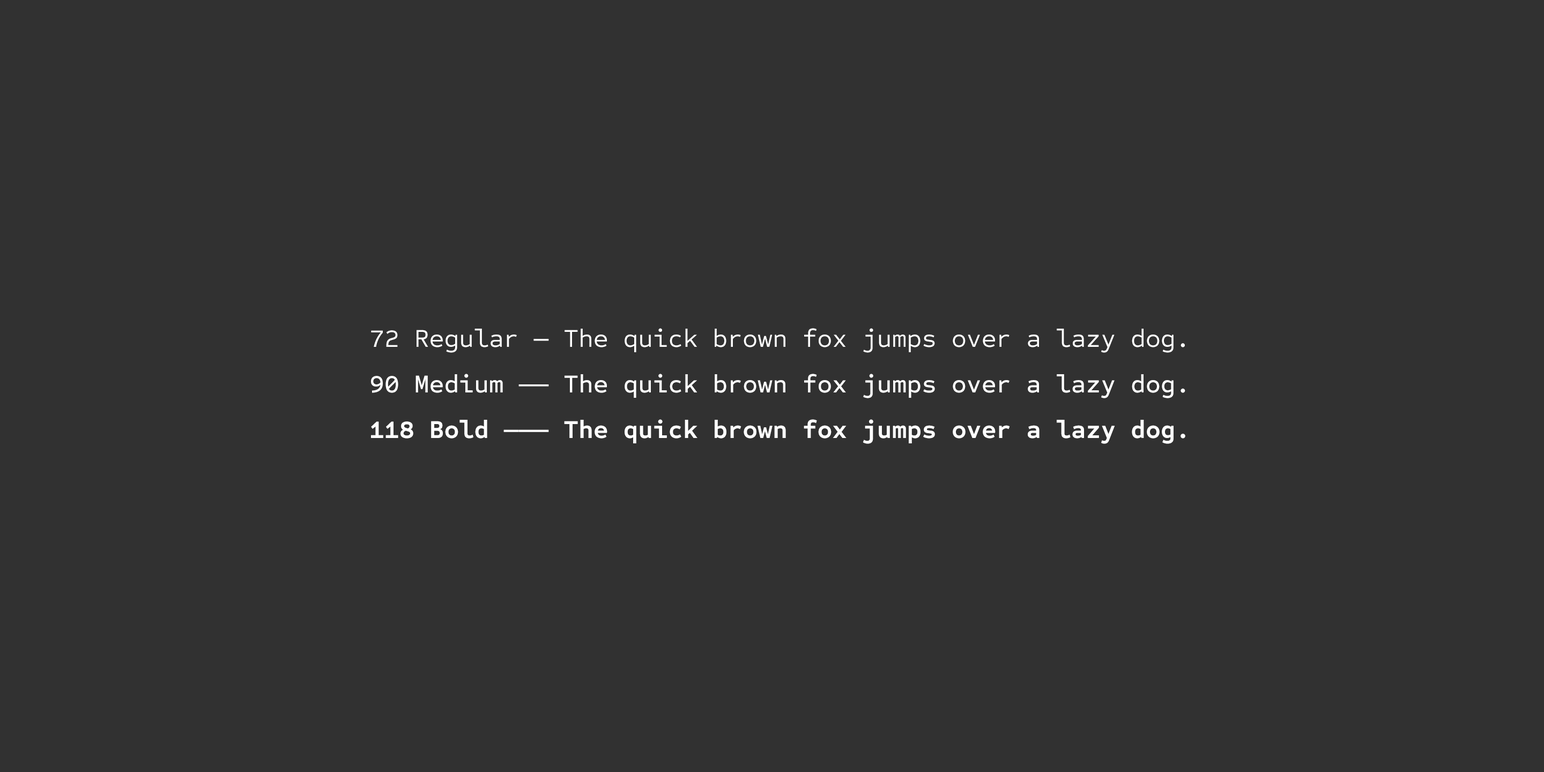
<style>
.page{position:relative;width:1544px;height:772px;background:#313131}
.page>*{position:absolute;margin:0}
.t1{font:25.7px "SometypeMono-Regular";color:#ffffff}
.t2{font:25.7px "SometypeMono-Medium";color:#ffffff}
.t3{font:25.7px "SometypeMono-Bold";color:#ffffff}
</style>
<div class="page">
<p class="t1" style="left:371px;top:328px;width:814px;height:25px">72 Regular — The quick brown fox jumps over a lazy dog.</p>
<p class="t2" style="left:371px;top:374px;width:815px;height:24px">90 Medium —— The quick brown fox jumps over a lazy dog.</p>
<p class="t3" style="left:371px;top:419px;width:815px;height:25px">118 Bold ——— The quick brown fox jumps over a lazy dog.</p>
</div>
